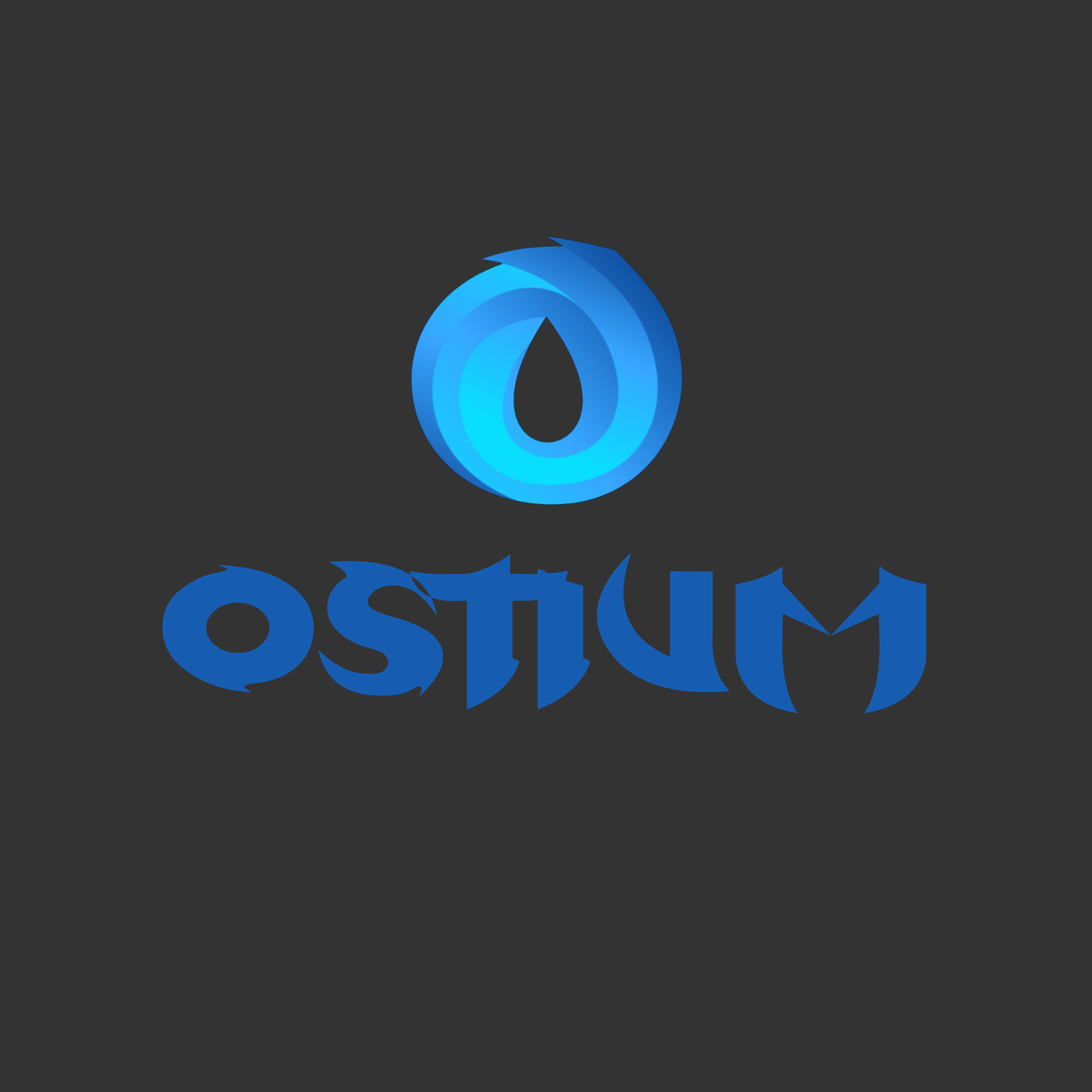
<style>
.page{position:relative;width:1092px;height:1092px;background:#333333}
.page>*{position:absolute;margin:0}
.t1{font:148.1px "KInifed";color:#165db2;scale:1.31 1}
</style>
<div class="page">
<p class="t1" style="left:162px;top:552px;width:765px;height:162px">OSTIUM</p>
</div>
